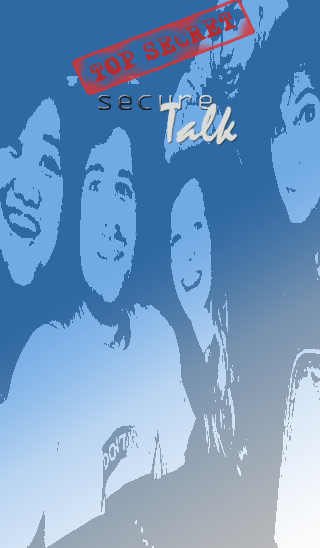
<style>
.page{position:relative;width:320px;height:548px;background:#2f69a3}
.page>*{position:absolute;margin:0}
.t1{font:26.1px "X-Classified";color:#bd2929}
.t2{font:27.6px "OCRAStd";color:#fdfcfc}
.t3{font:55.2px "Mistral";color:#fdfcfc}
</style>
<div class="page">
<p class="t1" style="left:89px;top:12px;width:148px;height:70px;rotate:-22deg;opacity:0.96">TOP SECRET</p>
<p class="t2" style="left:98px;top:95px;width:115px;height:15px;opacity:0.8">secure</p>
<p class="t3" style="left:160px;top:103px;width:77px;height:41px">Talk</p>
</div>
